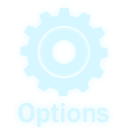
<style>
.page{position:relative;width:128px;height:128px;background:#ffffff}
.page>*{position:absolute;margin:0}
.t1{font:28px "FranklinGothic-Medium";color:#d6f7ff}
</style>
<div class="page">
<p class="t1" style="left:18px;top:103px;width:91px;height:24px">Options</p>
<p class="t1" style="left:18px;top:103px;width:91px;height:24px">Options</p>
</div>
